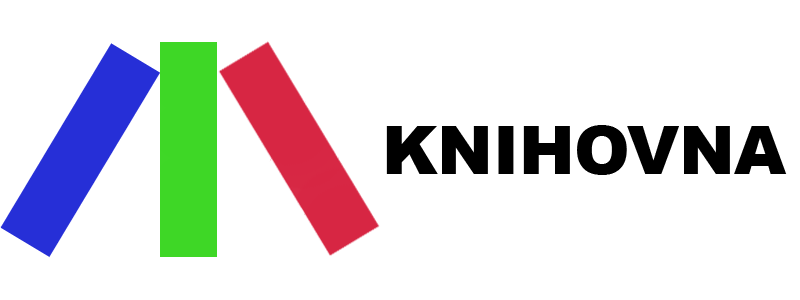
<style>
.page{position:relative;width:800px;height:300px;background:#ffffff}
.page>*{position:absolute;margin:0}
.t1{font:66.7px "Arial-Black";color:#000000}
</style>
<div class="page">
<p class="t1" style="left:386px;top:125px;width:401px;height:50px">KNIHOVNA</p>
</div>
